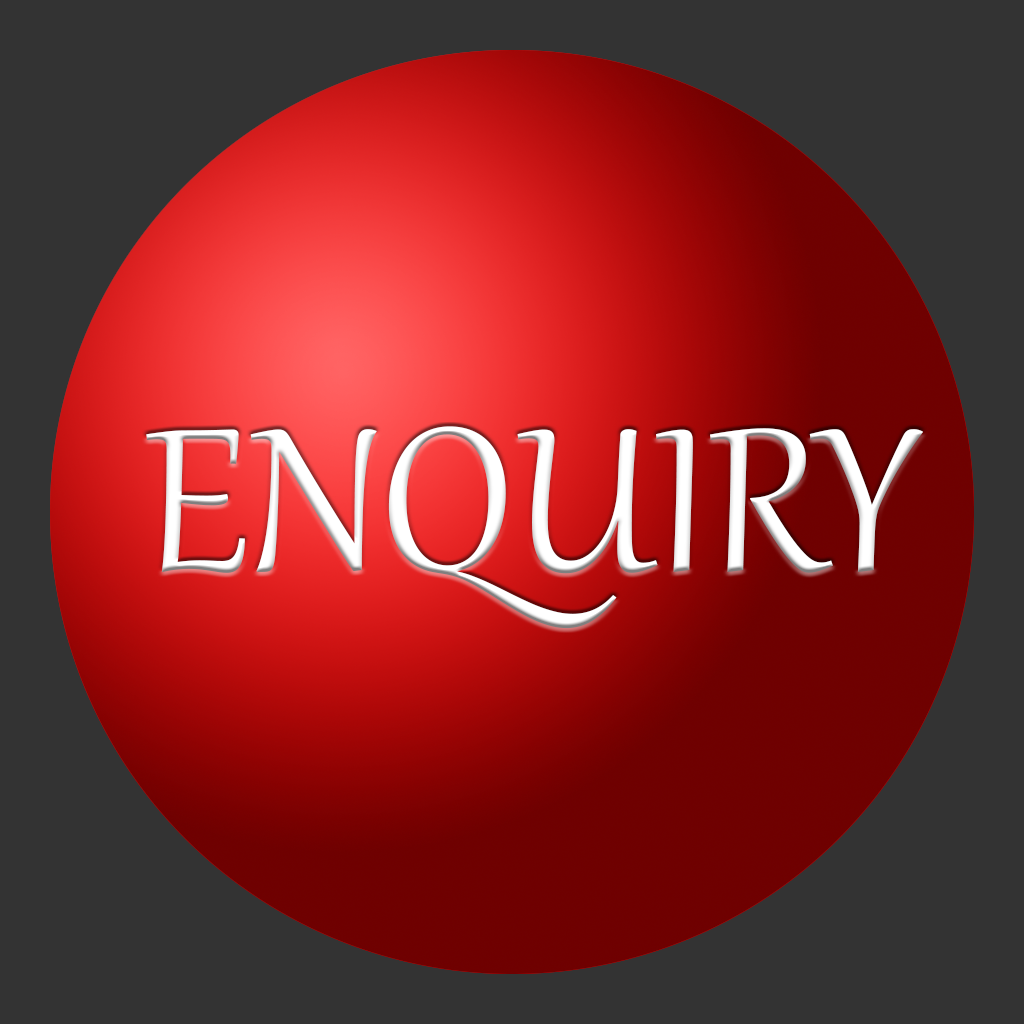
<style>
.page{position:relative;width:1024px;height:1024px;background:#333333}
.page>*{position:absolute;margin:0}
.t1{font:250px "Gabriola";color:#ffffff}
</style>
<div class="page">
<p class="t1" style="left:146px;top:426px;width:778px;height:203px">ENQUIRY</p>
</div>
